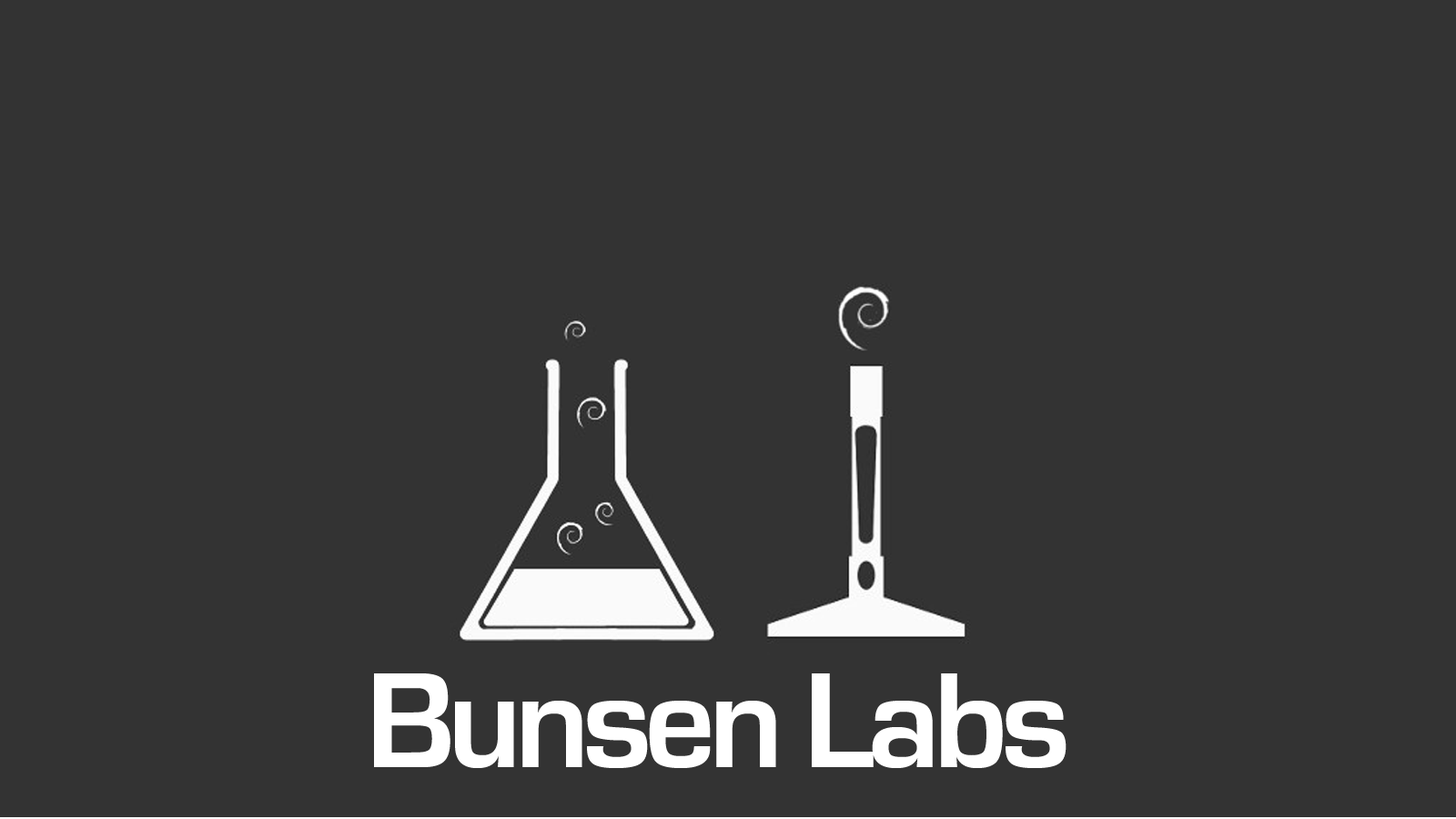
<style>
.page{position:relative;width:1456px;height:819px;background:#333333}
.page>*{position:absolute;margin:0}
.t1{font:140.2px "EurostileBold";letter-spacing:-0.05em;color:#ffffff}
</style>
<div class="page">
<p class="t1" style="left:374px;top:673px;width:693px;height:95px">Bunsen Labs</p>
</div>
